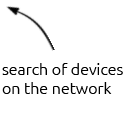
<style>
.page{position:relative;width:124px;height:122px;background:#ffffff}
.page>*{position:absolute;margin:0}
.t1{font:16px "Ubuntu-Light";color:#000000}
</style>
<div class="page">
<p class="t1" style="left:2px;top:63px;width:121px;height:31px">search of devices <br>on the network</p>
</div>
